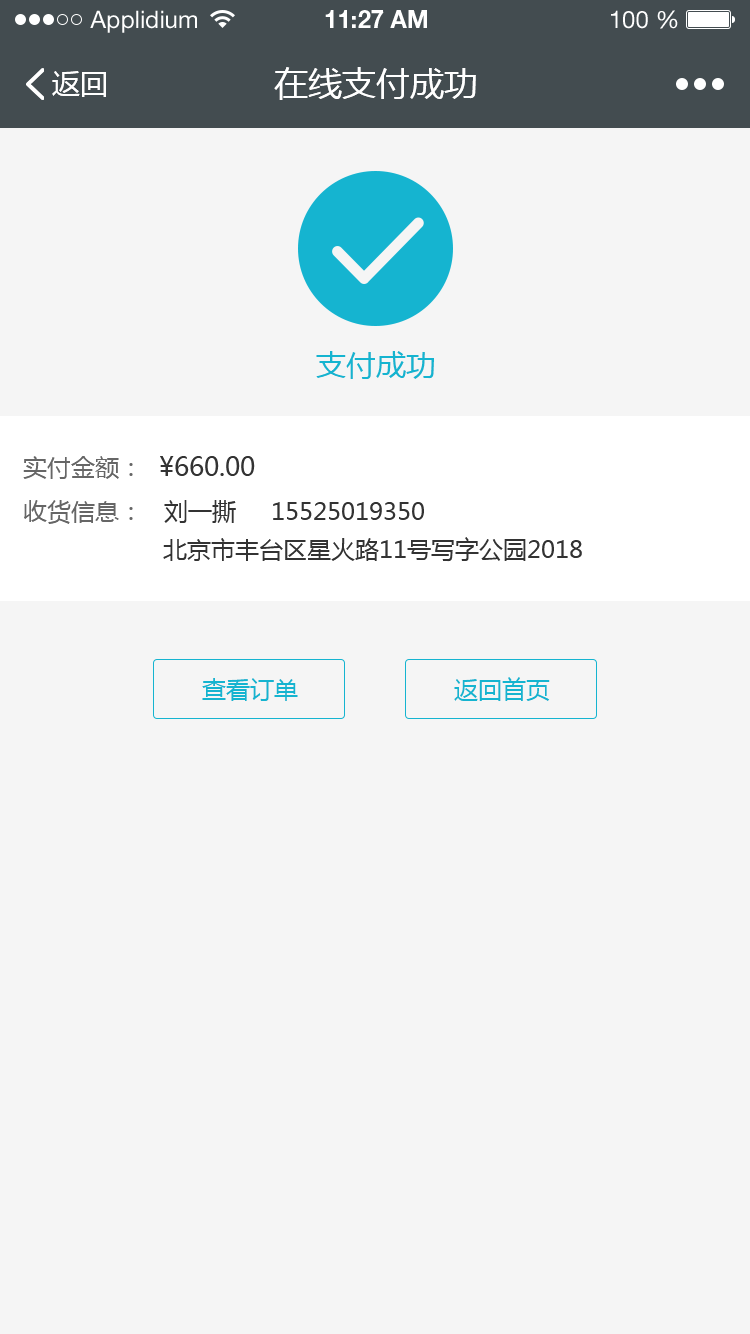
<style>
.page{position:relative;width:750px;height:1334px;background:#f5f5f5}
.page>*{position:absolute;margin:0}
.t1{font:24px "HelveticaNeueLTStd-Roman";color:#ffffff}
.t2{font:24px "HelveticaNeueLTStd-Bd";color:#ffffff}
.t3{font:28px "MicrosoftYaHei";color:#ffffff}
.t4{font:34px "MicrosoftYaHei";color:#ffffff}
.t5{font:30px "MicrosoftYaHei";color:#15b4d0}
.t6{font:24px/38px "MicrosoftYaHei";color:#333333}
.t7{font:24px/44px "MicrosoftYaHei";color:#666666}
.t8{font:26px/44px "MicrosoftYaHei";color:#333333}
.t9{font:24px/44px "MicrosoftYaHei";color:#333333}
.t10{font:24px "MicrosoftYaHei";color:#15b4d0}
</style>
<div class="page">
<p class="t1" style="left:90px;top:10px;width:107px;height:23px">Applidium</p>
<p class="t2" style="left:325px;top:10px;width:102px;height:18px">11:27 AM</p>
<p class="t1" style="left:611px;top:10px;width:67px;height:19px">100 %</p>
<p class="t3" style="left:52px;top:71px;width:54px;height:26px">返回</p>
<p class="t4" style="left:274px;top:67px;width:202px;height:33px">在线支付成功</p>
<p class="t5" style="left:316px;top:351px;width:118px;height:28px">支付成功</p>
<p class="t6" style="left:23px;top:456px;width:559px;height:106px"><span class="t7">实付金额：  </span><span class="t8">¥660.00<br></span><span class="t7">收货信息：   </span><span class="t9">刘一撕     15525019350<br>                    </span>北京市丰台区星火路11号写字公园2018</p>
<p class="t10" style="left:202px;top:678px;width:96px;height:23px">查看订单</p>
<p class="t10" style="left:454px;top:677px;width:96px;height:24px">返回首页</p>
</div>
